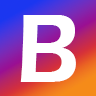
<style>
.page{position:relative;width:96px;height:96px;background:#ffffff}
.page>*{position:absolute;margin:0}
.t1{font:100px "ErasITC-Demi";color:#ffffff}
</style>
<div class="page">
<p class="t1" style="left:20px;top:15px;width:56px;height:67px">B</p>
</div>
